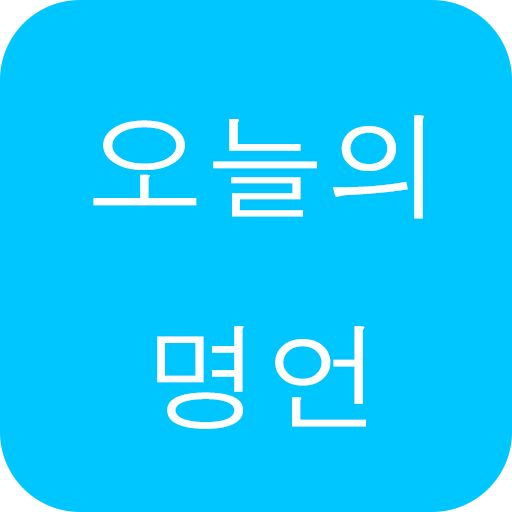
<style>
.page{position:relative;width:512px;height:512px;background:#00c6ff}
.page>*{position:absolute;margin:0}
.t1{font:120px "Dotum";color:#ffffff}
</style>
<div class="page">
<p class="t1" style="left:93px;top:115px;width:331px;height:314px;text-align:center">오늘의<br>명언</p>
</div>
